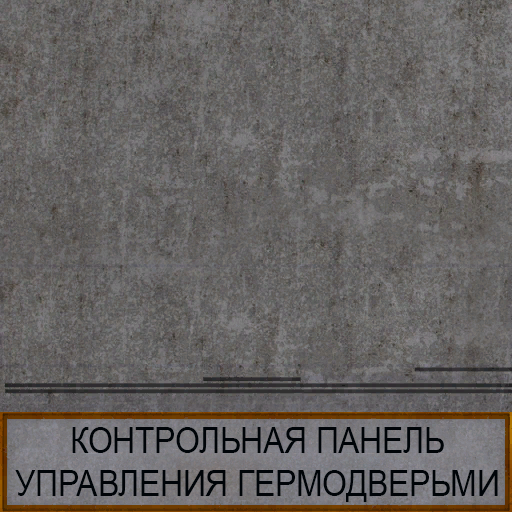
<style>
.page{position:relative;width:512px;height:512px}
.page>*{position:absolute;margin:0}
.t1{font:36px/43px "ArialMT";letter-spacing:-0.01em;color:#000408;scale:0.89 1}
</style>
<div class="page">
<p class="t1" style="left:15px;top:427px;width:483px;height:75px;text-align:center">КОНТРОЛЬНАЯ ПАНЕЛЬ<br>УПРАВЛЕНИЯ ГЕРМОДВЕРЬМИ</p>
</div>
